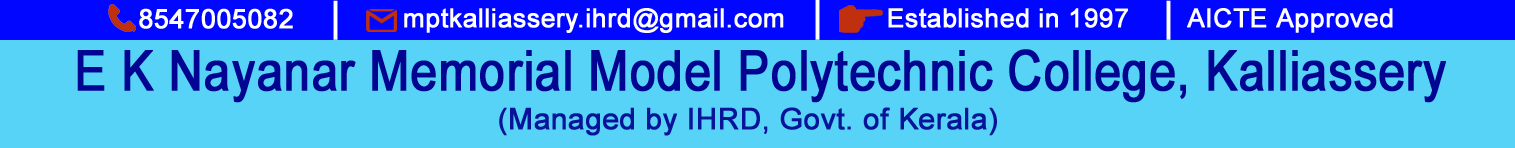
<style>
.page{position:relative;width:1515px;height:148px;background:#57d3f7}
.page>*{position:absolute;margin:0}
.t1{font:53.5px "ArialMT";color:#ffffff;font-weight:bold;scale:0.65 1}
.t2{font:56.2px "ArialMT";color:#ffffff;font-weight:bold;scale:0.61 1}
.t3{font:26.7px "ArialMT";color:#ffffff;font-weight:bold}
.t4{font:26.3px "ArialMT";color:#ffffff;font-weight:bold}
.t5{font:55.7px "ArialMT";color:#010592;font-weight:bold;scale:0.85 1}
.t6{font:29.4px "ArialMT";color:#071399;font-weight:bold}
</style>
<div class="page">
<p class="t1" style="left:333px;top:0px;width:5px;height:40px">l</p>
<p class="t2" style="left:815px;top:0px;width:5px;height:40px">l</p>
<p class="t1" style="left:1166px;top:0px;width:5px;height:40px">l</p>
<p class="t3" style="left:139px;top:8px;width:154px;height:21px">8547005082</p>
<p class="t4" style="left:404px;top:8px;width:380px;height:25px">mptkalliassery.ihrd@gmail.com</p>
<p class="t4" style="left:888px;top:8px;width:240px;height:20px">Established in 1997</p>
<p class="t4" style="left:1187px;top:8px;width:206px;height:25px">AICTE Approved</p>
<p class="t5" style="left:77px;top:49px;width:1369px;height:54px">E K Nayanar Memorial Model Polytechnic College, Kalliassery</p>
<p class="t6" style="left:499px;top:107px;width:498px;height:29px">(Managed by IHRD, Govt. of Kerala)</p>
</div>
